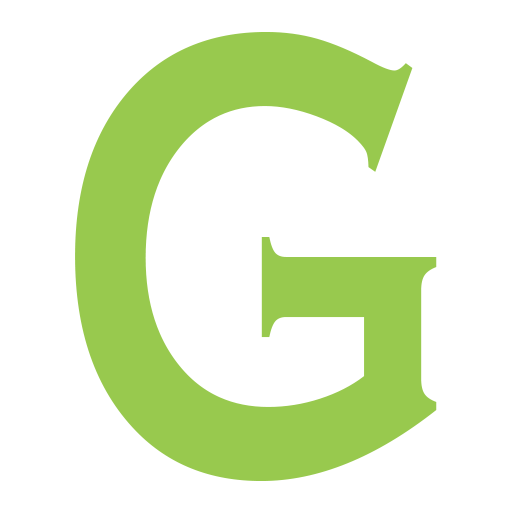
<style>
.page{position:relative;width:512px;height:512px;background:#ffffff}
.page>*{position:absolute;margin:0}
.t1{font:650px "CopperplateGothic-Bold";color:#98c94e;scale:0.73 1}
</style>
<div class="page">
<p class="t1" style="left:75px;top:32px;width:362px;height:449px">G</p>
</div>
